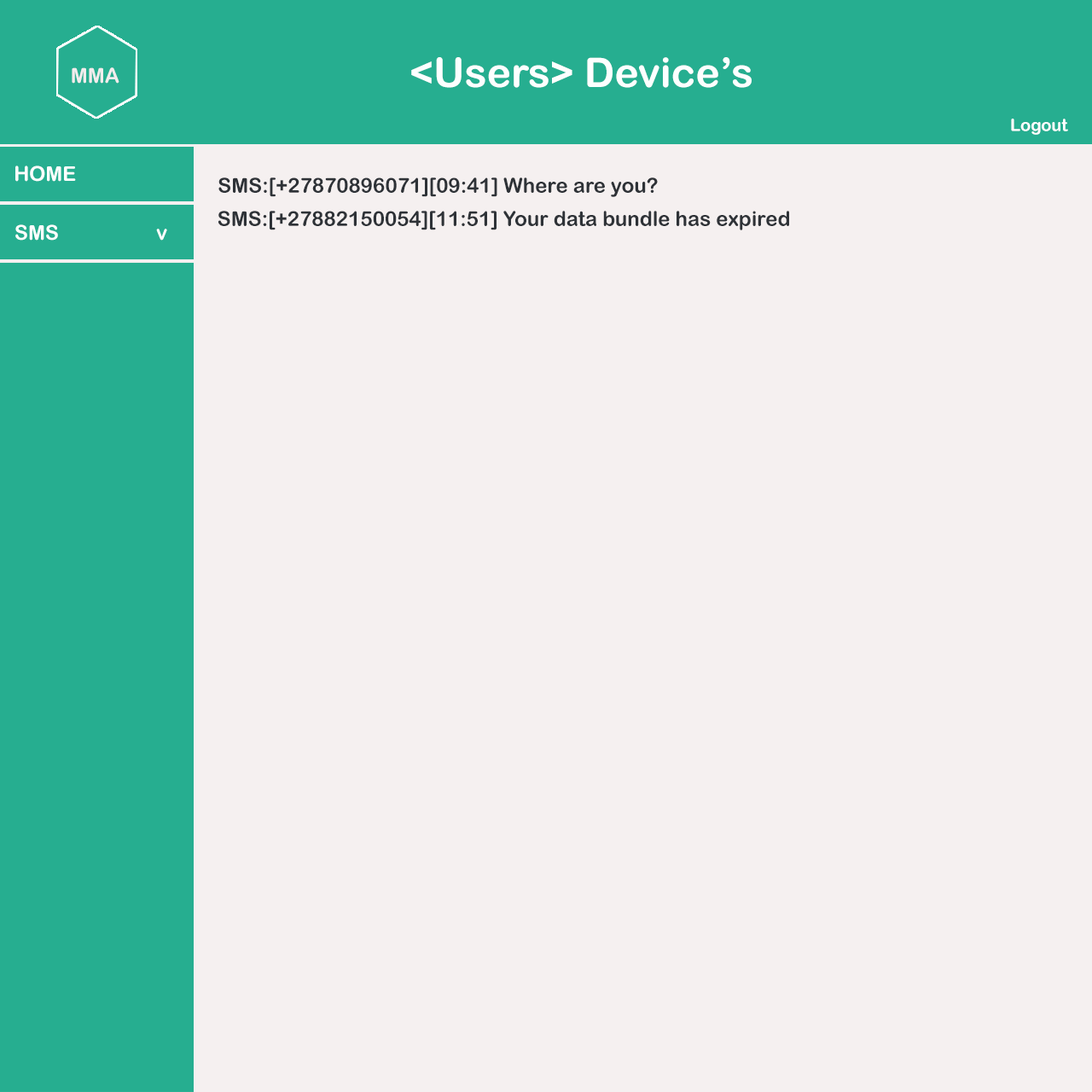
<style>
.page{position:relative;width:1092px;height:1092px;background:#f5f0f0}
.page>*{position:absolute;margin:0}
.t1{font:40.9px "ArialRoundedMTBold";color:#fcffff}
.t2{font:20.7px "ArialRoundedMTBold";color:#f2eded}
.t3{font:17.1px "ArialRoundedMTBold";color:#fefeff}
.t4{font:20.5px "ArialRoundedMTBold";color:#fcffff}
.t5{font:20.5px "ArialRoundedMTBold";color:#2e3237}
</style>
<div class="page">
<p class="t1" style="left:411px;top:57px;width:341px;height:31px">&lt;Users&gt; Device’s</p>
<p class="t2" style="left:72px;top:67px;width:47px;height:17px">MMA</p>
<p class="t3" style="left:1011px;top:119px;width:57px;height:16px">Logout</p>
<p class="t4" style="left:15px;top:166px;width:61px;height:16px">HOME</p>
<p class="t5" style="left:218px;top:177px;width:440px;height:20px">SMS:[+27870896071][09:41] Where are you?</p>
<p class="t5" style="left:218px;top:211px;width:571px;height:19px">SMS:[+27882150054][11:51] Your data bundle has expired</p>
<p class="t4" style="left:15px;top:224px;width:152px;height:17px">SMS                   v</p>
</div>
